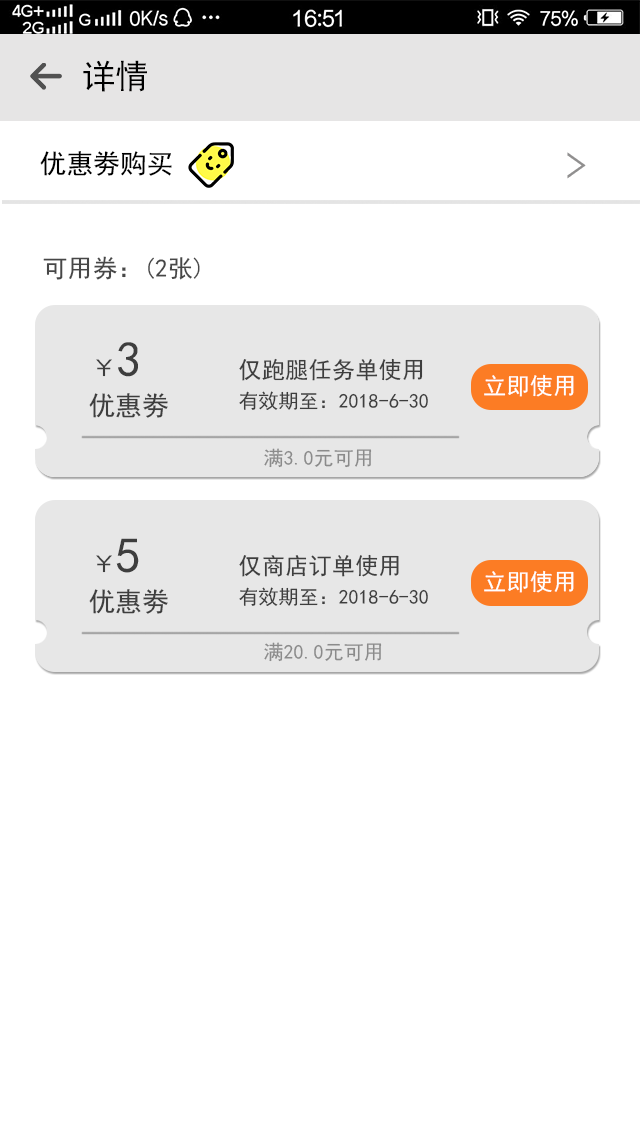
<style>
.page{position:relative;width:640px;height:1136px;background:#ffffff}
.page>*{position:absolute;margin:0}
.t1{font:33.3px "SimHei";letter-spacing:0.002em;color:#000000}
.t2{font:26.7px "SimHei";letter-spacing:0.002em;color:#000000}
.t3{font:25px "SimHei";letter-spacing:0.002em;color:#474747}
.t4{font:25px "SimHei";letter-spacing:0.002em;color:#3e3e3e}
.t5{font:50px "SimHei";letter-spacing:0.002em;color:#3e3e3e}
.t6{font:23.3px "SimHei";letter-spacing:0.002em;color:#3e3e3e}
.t7{font:23.3px "SimHei";letter-spacing:0.002em;color:#ffffff}
.t8{font:26.7px "SimHei";letter-spacing:0.002em;color:#3e3e3e}
.t9{font:20px "SimHei";letter-spacing:0.002em;color:#3e3e3e}
.t10{font:20px "SimHei";letter-spacing:0.002em;color:#8b8b8b}
</style>
<div class="page">
<p class="t1" style="left:83px;top:60px;width:64px;height:32px">详情</p>
<p class="t2" style="left:40px;top:151px;width:132px;height:25px">优惠劵购买</p>
<p class="t3" style="left:43px;top:256px;width:157px;height:24px">可用券：(2张)</p>
<p class="t4" style="left:96px;top:342px;width:42px;height:35px">￥<span class="t5">3</span></p>
<p class="t6" style="left:239px;top:358px;width:184px;height:23px">仅跑腿任务单使用</p>
<p class="t7" style="left:484px;top:374px;width:90px;height:23px">立即使用</p>
<p class="t8" style="left:89px;top:393px;width:79px;height:25px">优惠劵</p>
<p class="t9" style="left:239px;top:391px;width:189px;height:19px">有效期至：2018-6-30</p>
<p class="t10" style="left:264px;top:448px;width:108px;height:20px">满3.0元可用</p>
<p class="t4" style="left:96px;top:538px;width:43px;height:35px">￥<span class="t5">5</span></p>
<p class="t6" style="left:239px;top:554px;width:160px;height:23px">仅商店订单使用</p>
<p class="t7" style="left:484px;top:570px;width:90px;height:23px">立即使用</p>
<p class="t8" style="left:89px;top:589px;width:79px;height:25px">优惠劵</p>
<p class="t9" style="left:239px;top:587px;width:189px;height:19px">有效期至：2018-6-30</p>
<p class="t10" style="left:264px;top:642px;width:118px;height:20px">满20.0元可用</p>
</div>
